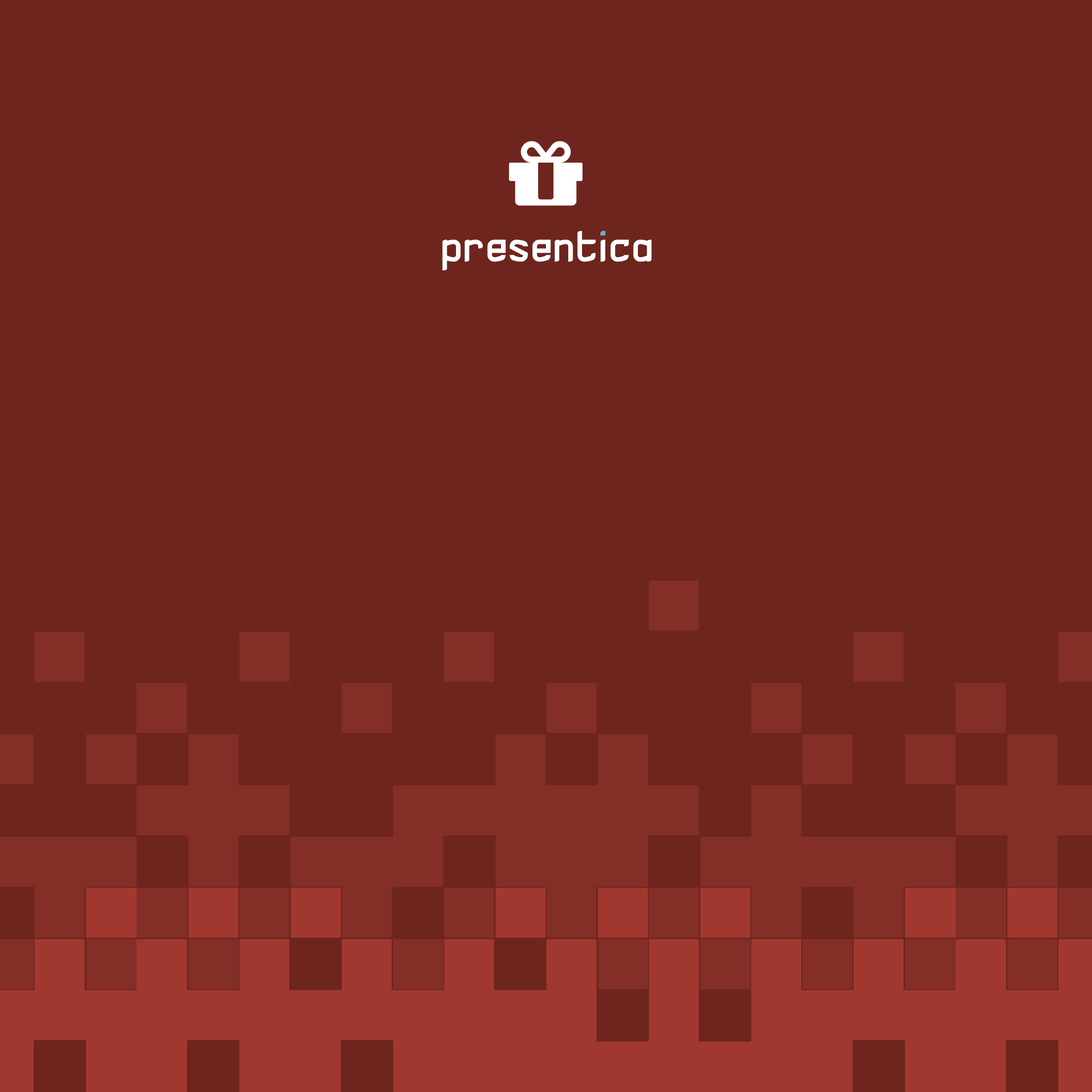
<style>
.page{position:relative;width:1092px;height:1092px;background:#6e251e}
.page>*{position:absolute;margin:0}
.t1{font:44.9px "V-Zel";letter-spacing:0.039em;color:#ffffff}
</style>
<div class="page">
<p class="t1" style="left:442px;top:231px;width:210px;height:40px">presentica</p>
</div>
